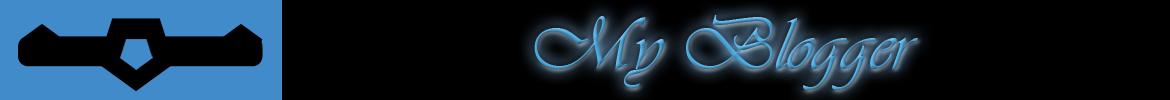
<style>
.page{position:relative;width:1170px;height:100px;background:#000000}
.page>*{position:absolute;margin:0}
.t1{font:76.4px "Vivaldii"}
</style>
<div class="page">
<p class="t1" style="left:534px;top:15px;width:384px;height:75px">My Blogger</p>
</div>
